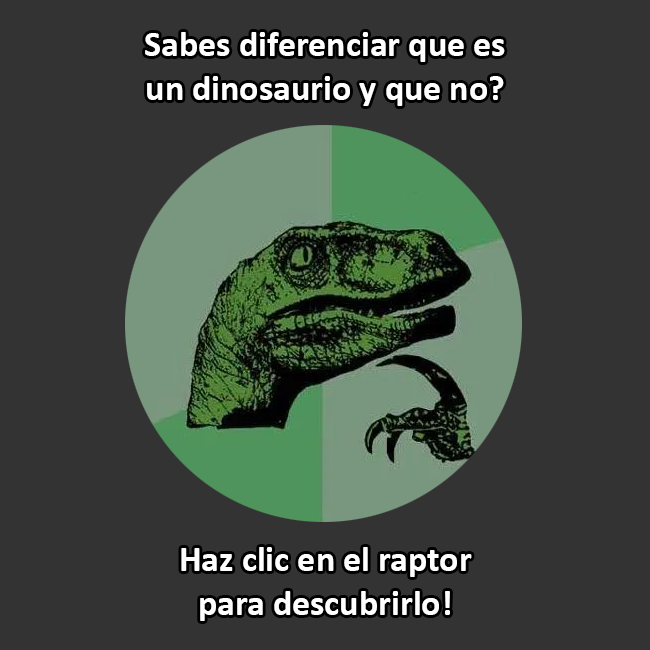
<style>
.page{position:relative;width:650px;height:650px;background:#333333}
.page>*{position:absolute;margin:0}
.t1{font:36px "Calibri-Bold";color:#ffffff}
</style>
<div class="page">
<p class="t1" style="left:145px;top:32px;width:360px;height:74px;text-align:center">Sabes diferenciar que es <br>un dinosaurio y que no?</p>
<p class="t1" style="left:181px;top:547px;width:291px;height:74px;text-align:center">Haz clic en el raptor <br>para descubrirlo!</p>
</div>
